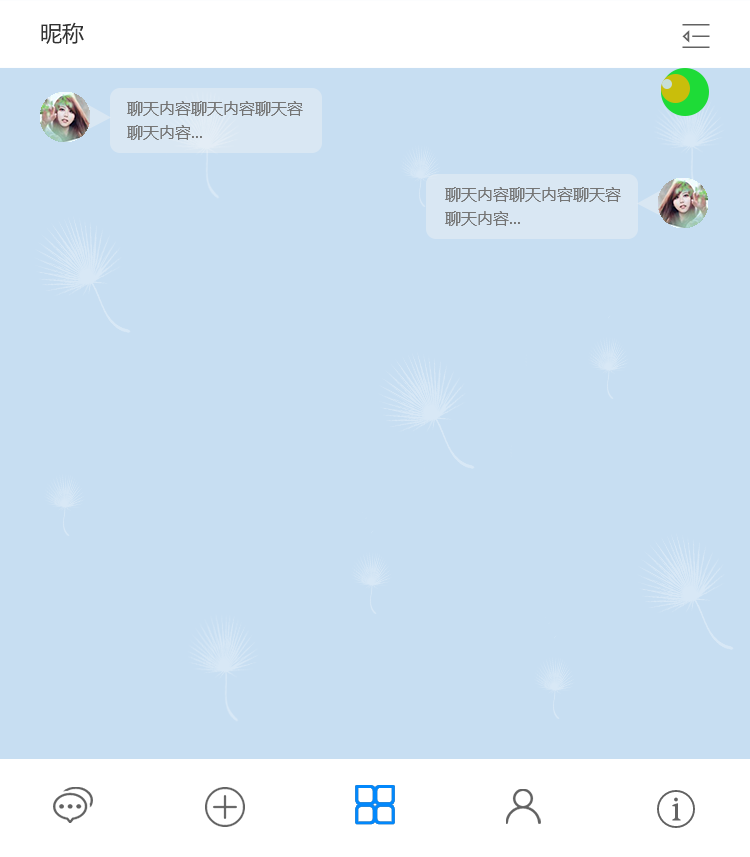
<style>
.page{position:relative;width:750px;height:857px;background:#c7def2}
.page>*{position:absolute;margin:0}
.t1{font:22px "MicrosoftYaHei";color:#323232;text-transform:uppercase}
.t2{font:16px/24px "MicrosoftYaHei";color:#757575}
</style>
<div class="page">
<p class="t1" style="left:41px;top:22px;width:43px;height:22px">昵称</p>
<p class="t2" style="left:127px;top:101px;width:176px;height:39px">聊天内容聊天内容聊天容<br>聊天内容...</p>
<p class="t2" style="left:445px;top:187px;width:176px;height:39px">聊天内容聊天内容聊天容<br>聊天内容...</p>
</div>
